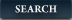
<style>
.page{position:relative;width:72px;height:20px}
.page>*{position:absolute;margin:0}
.t1{font:11px "ArnoPro-Bold";color:#f1f1f1}
</style>
<div class="page">
<p class="t1" style="left:15px;top:5px;width:42px;height:8px">SEARCH</p>
</div>
